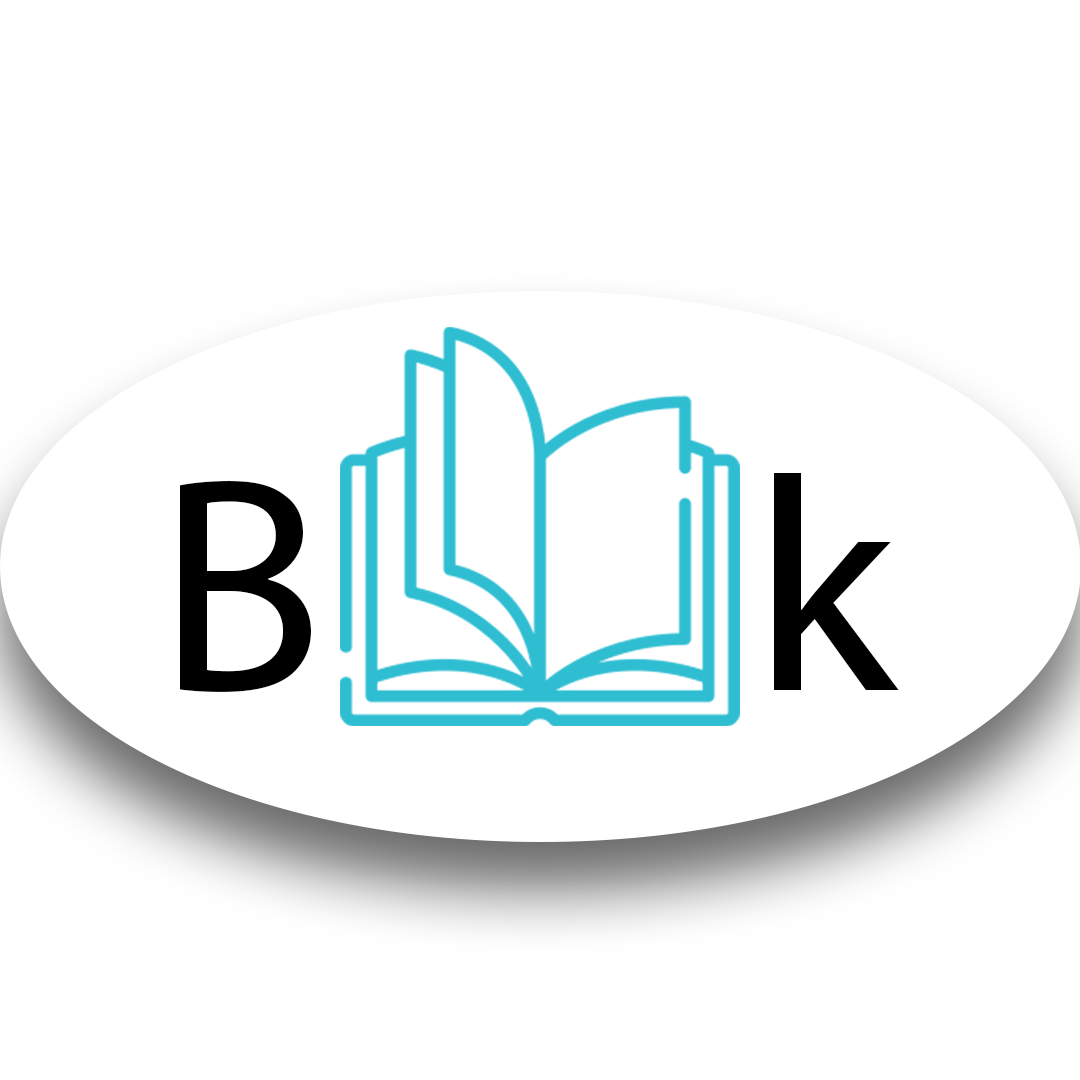
<style>
.page{position:relative;width:1080px;height:1080px;background:#ffffff}
.page>*{position:absolute;margin:0}
.t1{font:428.3px "MyriadArabic-Regular";color:#000000}
.t2{font:429.5px "MyriadArabic-Regular";color:#000000}
</style>
<div class="page">
<p class="t1" style="left:774px;top:473px;width:125px;height:217px">k</p>
<p class="t2" style="left:180px;top:481px;width:131px;height:211px">B</p>
</div>
